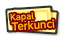
<style>
.page{position:relative;width:65px;height:41px;background:#ffffff}
.page>*{position:absolute;margin:0}
.t1{font:10px/10px "UDShinGoPro-DeBold";color:#ffba00}
.t2{font:8px/10px "UDShinGoPro-DeBold";color:#ffba00}
</style>
<div class="page">
<p class="t1" style="left:10px;top:12px;width:45px;height:19px;text-align:center;rotate:-4deg"><span class="t2">Kapal<br>        </span>Terkunci</p>
</div>
